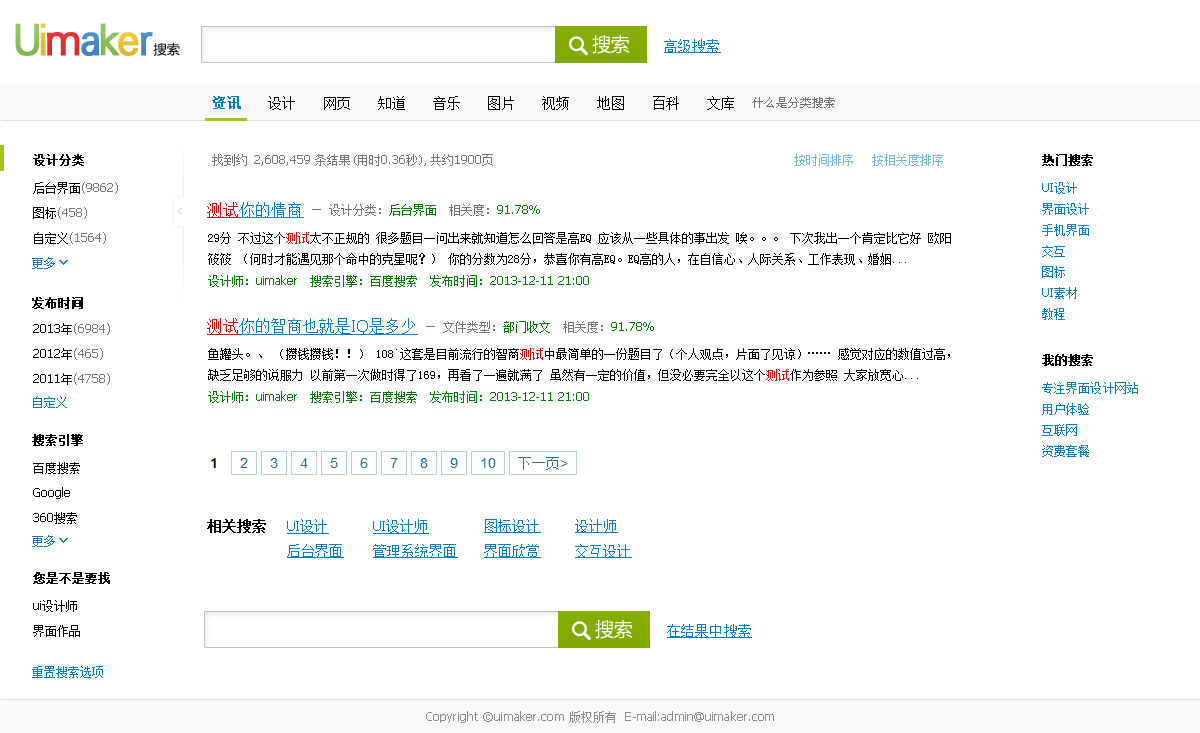
<style>
.page{position:relative;width:1200px;height:733px;background:#ffffff}
.page>*{position:absolute;margin:0}
.t1{font:40.9px "Tianshi-HeiOld";letter-spacing:-0.05em;color:#8abe58;font-weight:bold}
.t2{font:40.9px "Tianshi-HeiOld";letter-spacing:-0.05em;color:#e8bb33;font-weight:bold}
.t3{font:40.9px "Tianshi-HeiOld";letter-spacing:-0.05em;color:#89bd58;font-weight:bold}
.t4{font:40.9px "Tianshi-HeiOld";letter-spacing:-0.05em;color:#e63030;font-weight:bold}
.t5{font:40.9px "Tianshi-HeiOld";letter-spacing:-0.05em;color:#438ac5;font-weight:bold}
.t6{font:40.9px "Tianshi-HeiOld";letter-spacing:-0.05em;color:#ebbf33;font-weight:bold}
.t7{font:40.9px "Tianshi-HeiOld";letter-spacing:-0.05em;color:#468dc8;font-weight:bold}
.t8{font:18.9px "MicrosoftYaHei";letter-spacing:-0.025em;color:#ffffff}
.t9{font:14px "SimSun";letter-spacing:0.01em;color:#0080cc;text-decoration:underline}
.t10{font:13.1px "FZLTXHFW--GB1-0";letter-spacing:0.01em}
.t11{font:14px "SimSun";letter-spacing:0.01em;color:#000000}
.t12{font:14px "OldSun";letter-spacing:-0.025em;color:#0080cc;font-weight:bold}
.t13{font:12px "OldSun";color:#727272}
.t14{font:12px "SimSun";color:#000000;font-weight:bold}
.t15{font:12px "Tahoma";color:#757575}
.t16{font:12px "SimSun";color:#757575}
.t17{font:12px "SimSun";color:#75bae3}
.t18{font:12px/25px "Tahoma";color:#787878}
.t19{font:12px/25px "SimSun";color:#000000}
.t20{font:12px/20.9px "SimSun";letter-spacing:0.01em;color:#0080cc}
.t21{font:12px/20.9px "Tahoma";letter-spacing:0.01em;color:#0080cc}
.t22{font:16px "SimSun";color:#0080cc;text-decoration:underline}
.t23{font:16px "SimSun";color:#d90909;text-decoration:underline}
.t24{font:12px "SimSun";color:#767676}
.t25{font:12px "SimSun";color:#008000}
.t26{font:12px "Tahoma";color:#008000}
.t27{font:12px/20.9px "SimSun";color:#000000}
.t28{font:12px/20.9px "SimSun";color:#d90909}
.t29{font:12px "SimSun";color:#0080cc}
.t30{font:16px "Tahoma";color:#0080cc;text-decoration:underline}
.t31{font:12px/25px "Tahoma";color:#000000}
.t32{font:14px "SimSun";color:#000000;font-weight:bold}
.t33{font:14px/25px "SimSun";color:#0080cc;text-decoration:underline}
.t34{font:14px/25px "Tahoma";color:#0080cc;text-decoration:underline}
.t35{font:12px "Tahoma";letter-spacing:0.01em;color:#8c8c8c}
.t36{font:12px "SimSun";letter-spacing:0.01em;color:#8c8c8c}
</style>
<div class="page">
<p class="t1" style="left:15px;top:23px;width:24px;height:33px">U</p>
<p class="t2" style="left:40px;top:23px;width:6px;height:33px">i</p>
<p class="t3" style="left:100px;top:23px;width:20px;height:33px">k</p>
<p class="t4" style="left:46px;top:32px;width:34px;height:24px">m</p>
<p class="t5" style="left:81px;top:32px;width:19px;height:24px">a</p>
<p class="t6" style="left:118px;top:32px;width:21px;height:24px">e</p>
<p class="t7" style="left:140px;top:32px;width:13px;height:24px">r</p>
<p class="t8" style="left:592px;top:35px;width:38px;height:19px">搜索</p>
<p class="t9" style="left:664px;top:39px;width:57px;height:14px">高级搜索</p>
<p class="t10" style="left:153px;top:42px;width:27px;height:14px">搜索</p>
<p class="t11" style="left:212px;top:96px;width:522px;height:14px"><span class="t12">资讯    </span>设计    网页    知道    音乐    图片    视频    地图    百科    文库</p>
<p class="t13" style="left:752px;top:97px;width:83px;height:11px">什么是分类搜索</p>
<p class="t14" style="left:33px;top:154px;width:51px;height:12px">设计分类</p>
<p class="t15" style="left:212px;top:154px;width:281px;height:12px"><span class="t16">找到约 </span>2,608,459 <span class="t16">条结果(用时</span>0.36<span class="t16">秒),共约</span>1900<span class="t16">页</span></p>
<p class="t17" style="left:794px;top:154px;width:149px;height:12px">按时间排序   按相关度排序</p>
<p class="t14" style="left:1042px;top:154px;width:51px;height:12px">热门搜索</p>
<p class="t18" style="left:33px;top:182px;width:85px;height:62px"><span class="t19">后台界面</span>(9862)<br><span class="t19">图标</span>(458)<br><span class="t19">自定义</span>(1564)</p>
<p class="t20" style="left:1042px;top:182px;width:47px;height:138px"><span class="t21">UI</span>设计<br>界面设计<br>手机界面<br>交互<br>图标<span class="t21"><br>UI</span>素材<br>教程</p>
<p class="t22" style="left:207px;top:202px;width:97px;height:16px"><span class="t23">测试</span>你的情商</p>
<p class="t24" style="left:312px;top:204px;width:228px;height:12px">— 设计分类：<span class="t25">后台界面  </span>相关度：<span class="t26">91.78%</span></p>
<p class="t27" style="left:208px;top:232px;width:743px;height:33px">29分 不过这个<span class="t28">测试</span>太不正规的 很多题目一问出来就知道怎么回答是高EQ 应该从一些具体的事出发 唉。。。 下次我出一个肯定比它好 欧阳筱筱 （何时才能遇见那个命中的克星呢？） 你的分数为28分，恭喜你有高EQ。EQ高的人，在自信心、人际关系、工作表现、婚姻...</p>
<p class="t29" style="left:32px;top:257px;width:23px;height:12px">更多</p>
<p class="t25" style="left:208px;top:275px;width:381px;height:12px">设计师：<span class="t26">uimaker</span>  搜索引擎：百度搜索  发布时间：<span class="t26">2013-12-11 21:00</span></p>
<p class="t14" style="left:32px;top:297px;width:51px;height:12px">发布时间</p>
<p class="t22" style="left:207px;top:318px;width:211px;height:17px"><span class="t23">测试</span>你的智商也就是<span class="t30">IQ</span>是多少</p>
<p class="t18" style="left:33px;top:323px;width:77px;height:62px"><span class="t31">2013</span><span class="t19">年</span>(6984)<br><span class="t31">2012</span><span class="t19">年</span>(465)<br><span class="t31">2011</span><span class="t19">年</span>(4758)</p>
<p class="t24" style="left:426px;top:321px;width:228px;height:12px">— 文件类型：<span class="t25">部门收文  </span>相关度：<span class="t26">91.78%</span></p>
<p class="t27" style="left:208px;top:348px;width:742px;height:33px">鱼罐头。、 （攒钱攒钱！！） 108`这套是目前流行的智商<span class="t28">测试</span>中最简单的一份题目了（个人观点，片面了见谅）…… 感觉对应的数值过高，缺乏足够的说服力 以前第一次做时得了169，再看了一遍就满了 虽然有一定的价值，但没必要完全以这个<span class="t28">测试</span>作为参照 大家放宽心...</p>
<p class="t14" style="left:1042px;top:354px;width:51px;height:12px">我的搜索</p>
<p class="t20" style="left:1042px;top:382px;width:96px;height:75px">专注界面设计网站<br>用户体验<br>互联网<br>资费套餐</p>
<p class="t29" style="left:33px;top:396px;width:34px;height:12px">自定义</p>
<p class="t25" style="left:208px;top:391px;width:381px;height:12px">设计师：<span class="t26">uimaker</span>  搜索引擎：百度搜索  发布时间：<span class="t26">2013-12-11 21:00</span></p>
<p class="t14" style="left:32px;top:434px;width:51px;height:12px">搜索引擎</p>
<p class="t31" style="left:33px;top:462px;width:47px;height:62px"><span class="t19">百度搜索<br></span>Google<br>360<span class="t19">搜索</span></p>
<p class="t32" style="left:207px;top:519px;width:59px;height:14px">相关搜索</p>
<p class="t33" style="left:287px;top:519px;width:57px;height:39px"><span class="t34">UI</span>设计<br>后台界面</p>
<p class="t33" style="left:373px;top:519px;width:85px;height:39px"><span class="t34">UI</span>设计师<br>管理系统界面</p>
<p class="t33" style="left:484px;top:519px;width:57px;height:39px">图标设计<br>界面欣赏</p>
<p class="t33" style="left:575px;top:519px;width:57px;height:39px">设计师<br>交互设计</p>
<p class="t29" style="left:32px;top:535px;width:23px;height:12px">更多</p>
<p class="t14" style="left:33px;top:572px;width:77px;height:12px">您是不是要找</p>
<p class="t19" style="left:33px;top:600px;width:47px;height:37px"><span class="t31">ui</span>设计师<br>界面作品</p>
<p class="t8" style="left:595px;top:620px;width:38px;height:19px">搜索</p>
<p class="t9" style="left:667px;top:624px;width:85px;height:14px">在结果中搜索</p>
<p class="t29" style="left:32px;top:666px;width:71px;height:12px">重置搜索选项</p>
<p class="t35" style="left:426px;top:711px;width:348px;height:12px">Copyright ©uimaker.com <span class="t36">版权所有</span>  E-mail:admin@uimaker.com</p>
</div>
